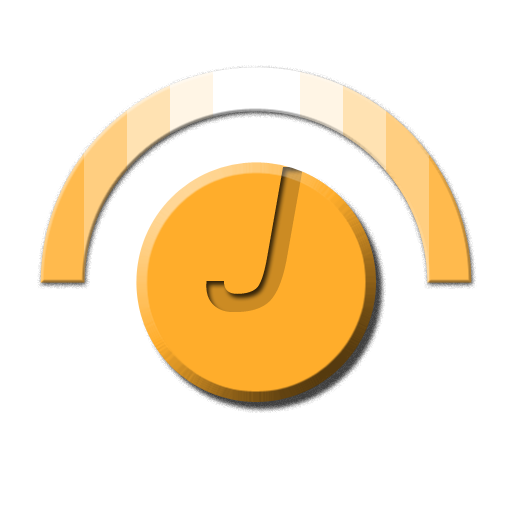
<style>
.page{position:relative;width:512px;height:512px;background:#ffffff}
.page>*{position:absolute;margin:0}
.t1{font:200px "TrebuchetMS-Italic"}
</style>
<div class="page">
<p class="t1" style="left:206px;top:167px;width:97px;height:145px">J</p>
</div>
